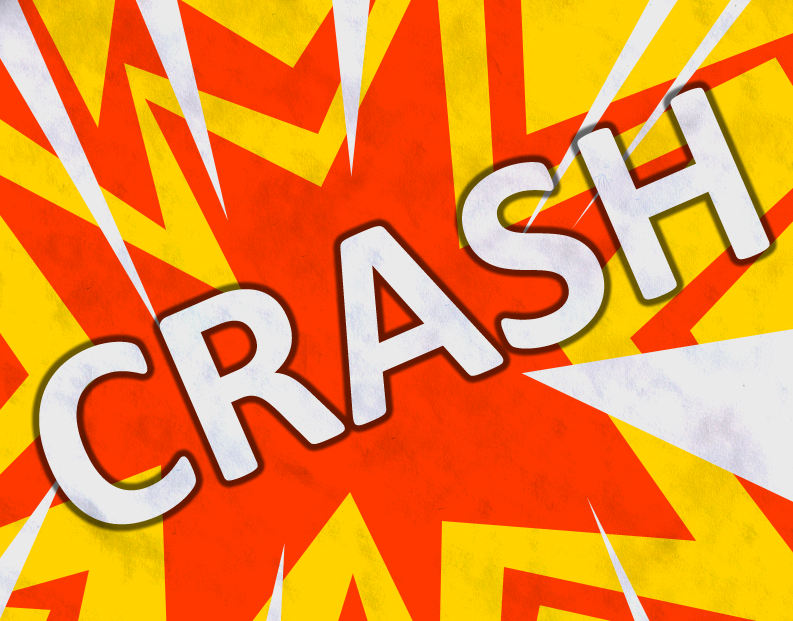
<style>
.page{position:relative;width:793px;height:621px}
.page>*{position:absolute;margin:0}
.t1{font:277.8px "Calibri-Bold";color:#eaeaea}
</style>
<div class="page">
<p class="t1" style="left:39px;top:87px;width:731px;height:438px;rotate:-23deg">CRASH</p>
</div>
